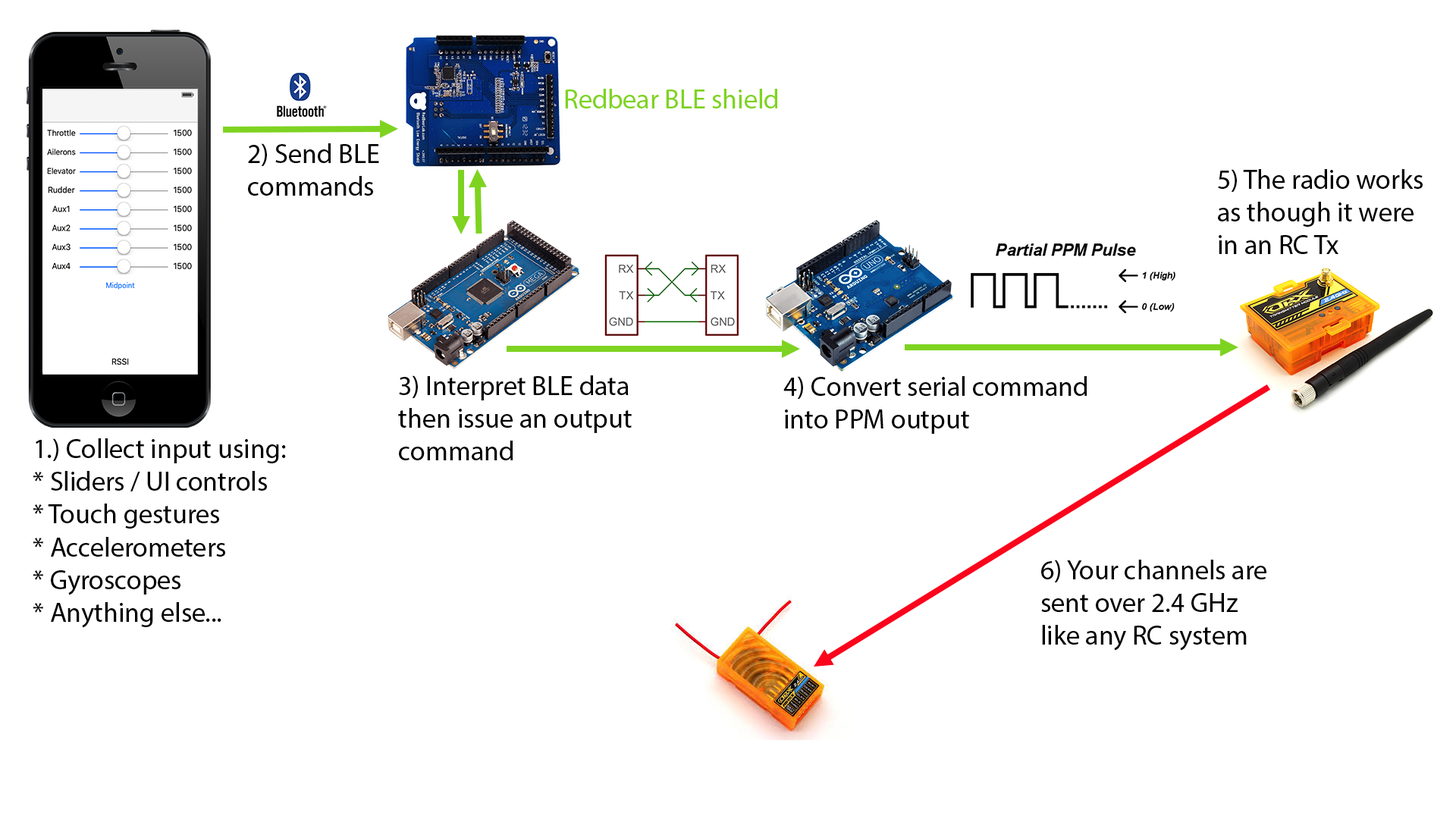
<style>
.page{position:relative;width:1456px;height:819px;background:#ffffff}
.page>*{position:absolute;margin:0}
.t1{font:27.3px "MyriadPro-Regular";color:#7ed321}
.t2{font:27.3px "MyriadPro-Regular";color:#000000}
</style>
<div class="page">
<p class="t1" style="left:565px;top:89px;width:212px;height:19px">Redbear BLE shield</p>
<p class="t2" style="left:248px;top:143px;width:131px;height:53px">2) Send BLE<br>commands</p>
<p class="t2" style="left:1218px;top:169px;width:205px;height:85px">5) The radio works<br>as though it were <br>in an RC Tx</p>
<p class="t2" style="left:398px;top:375px;width:234px;height:85px">3) Interpret BLE data<br>then issue an output<br>command</p>
<p class="t2" style="left:783px;top:376px;width:304px;height:58px">4) Convert serial command<br>into PPM output</p>
<p class="t2" style="left:33px;top:438px;width:253px;height:190px">1.) Collect input using:<br>* Sliders / UI controls<br>* Touch gestures<br>* Accelerometers<br>* Gyroscopes<br>* Anything else...</p>
<p class="t2" style="left:1041px;top:560px;width:225px;height:91px">6) Your channels are <br>sent over 2.4 GHz <br>like any RC system</p>
</div>
